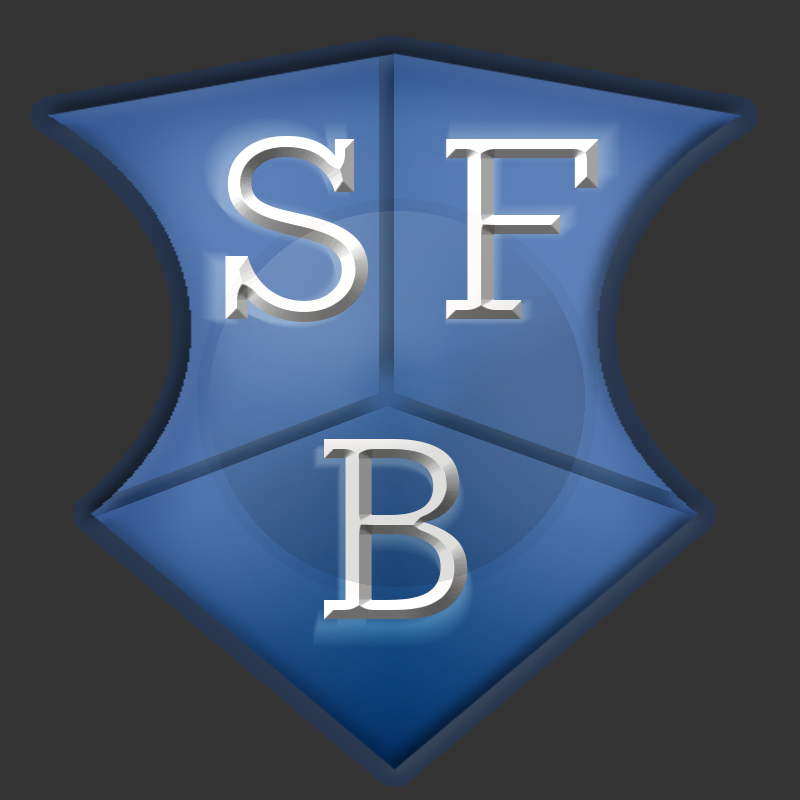
<style>
.page{position:relative;width:800px;height:800px;background:#333333}
.page>*{position:absolute;margin:0}
.t1{font:250px "GeometricSlab703BT-Medium";letter-spacing:0.2em;scale:1.09 1}
</style>
<div class="page">
<p class="t1" style="left:225px;top:136px;width:374px;height:483px;text-align:center">SF<br>B</p>
</div>
